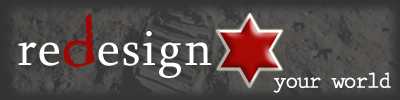
<style>
.page{position:relative;width:400px;height:100px}
.page>*{position:absolute;margin:0}
.t1{font:50px "Sylfaen";letter-spacing:0.04em;color:#ffffff}
.t2{font:23.3px "PrestigeEliteStd-Bd";letter-spacing:-0.1em;color:#ffffff}
</style>
<div class="page">
<p class="t1" style="left:18px;top:31px;width:194px;height:47px">re  esign</p>
<p class="t2" style="left:273px;top:72px;width:118px;height:21px">your world</p>
</div>
